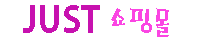
<style>
.page{position:relative;width:200px;height:40px;background:#ffffff}
.page>*{position:absolute;margin:0}
.t1{font:36px "AdobeGothicStd-Bold";color:#c711af}
.t2{font:30px "MagicR-HM";color:#fb45e3}
</style>
<div class="page">
<p class="t1" style="left:23px;top:5px;width:146px;height:32px">JUST <span class="t2">쇼핑몰</span></p>
</div>
